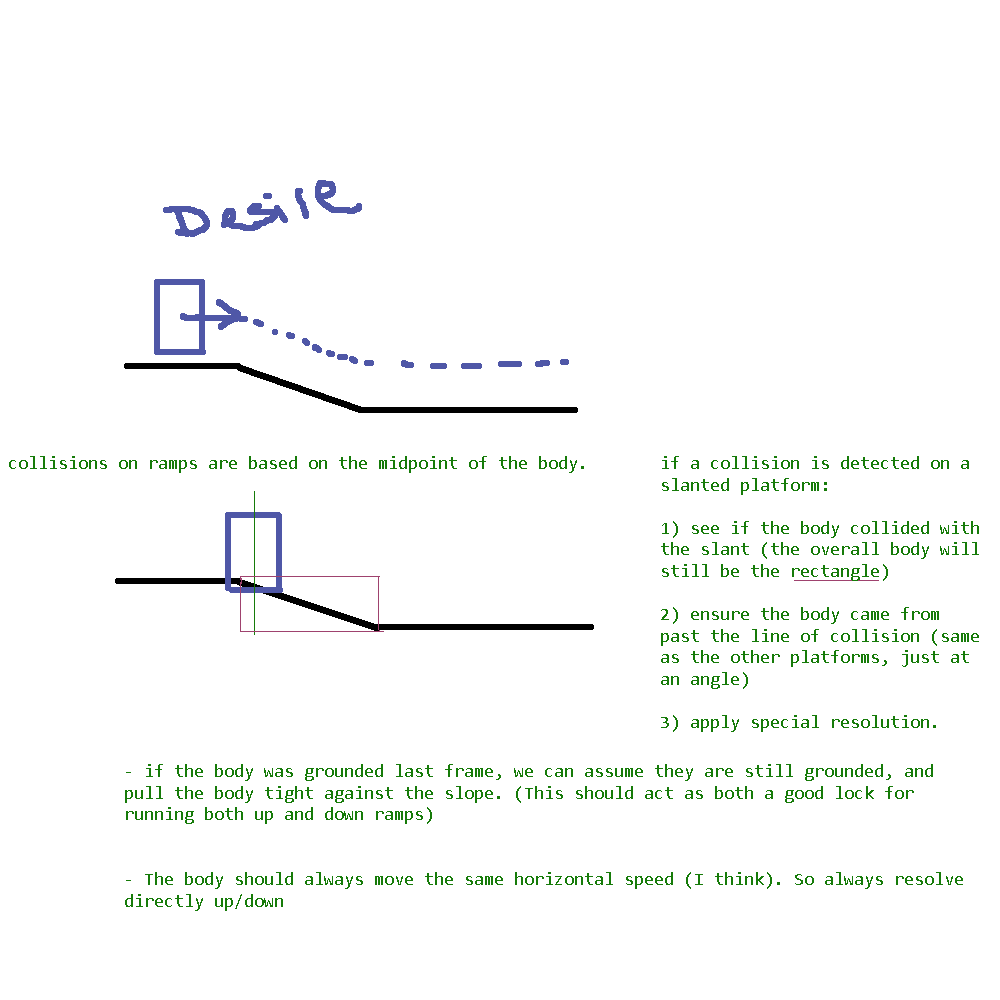
<style>
.page{position:relative;width:1000px;height:1000px;background:#ffffff}
.page>*{position:absolute;margin:0}
.t1{font:18px "Consolas";color:#167b09}
</style>
<div class="page">
<p class="t1" style="left:9px;top:456px;width:575px;height:17px">collisions on ramps are based on the midpoint of the body.</p>
<p class="t1" style="left:661px;top:456px;width:318px;height:276px">if a collision is detected on a slanted platform:<br><br>1) see if the body collided with the slant (the overall body will still be the rectangle)<br><br>2) ensure the body came from past the line of collision (same as the other platforms, just at an angle)<br><br>3) apply special resolution.</p>
<p class="t1" style="left:125px;top:764px;width:838px;height:147px">- if the body was grounded last frame, we can assume they are still grounded, and<br>pull the body tight against the slope. (This should act as both a good lock for<br>running both up and down ramps)<br><br><br>- The body should always move the same horizontal speed (I think). So always resolve<br>directly up/down</p>
</div>
